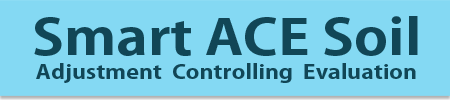
<style>
.page{position:relative;width:450px;height:100px;background:#84d9f3}
.page>*{position:absolute;margin:0}
.t1{font:48.7px "AdobeGothicStd-Bold";color:#114656;scale:1.19 1}
.t2{font:19.2px "AdobeGothicStd-Bold";color:#114656;scale:1.2 1}
</style>
<div class="page">
<p class="t1" style="left:34px;top:16px;width:384px;height:40px">Smart ACE Soil</p>
<p class="t2" style="left:36px;top:63px;width:380px;height:20px">Adjustment  Controlling  Evaluation</p>
</div>
